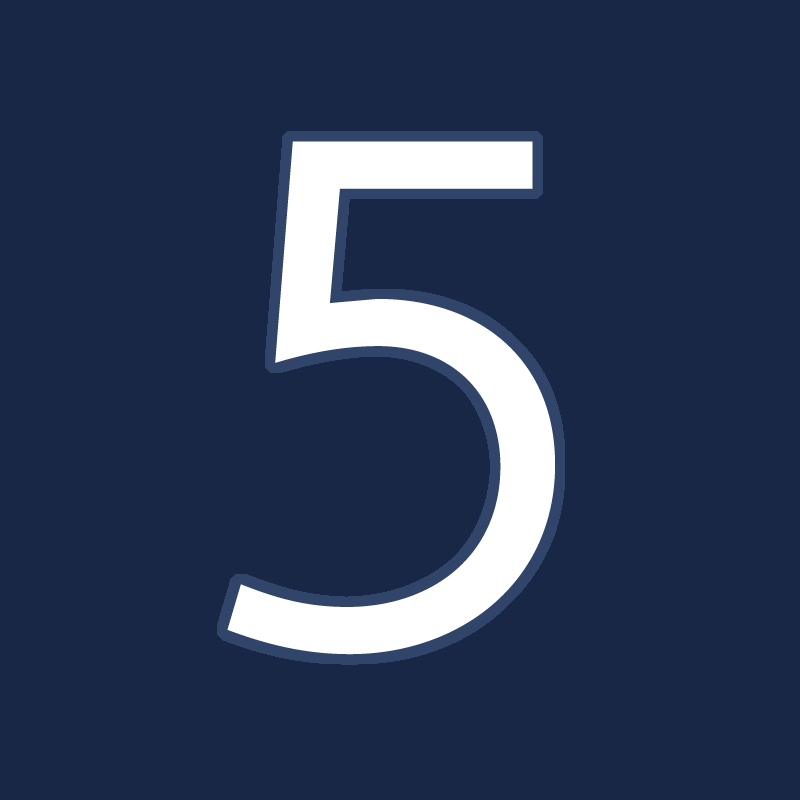
<style>
.page{position:relative;width:800px;height:800px;background:#172745}
.page>*{position:absolute;margin:0}
.t1{font:837.2px "PrestigeEliteStd-Bd";color:#ffffff}
</style>
<div class="page">
<p class="t1" style="left:227px;top:141px;width:328px;height:514px">5</p>
</div>
